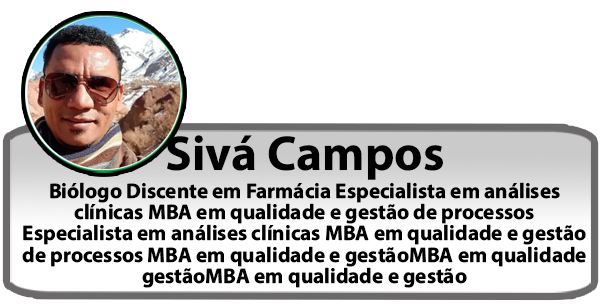
<style>
.page{position:relative;width:600px;height:307px;background:#ffffff}
.page>*{position:absolute;margin:0}
.t1{font:21.2px/21.2px "MyriadConceptRoman-Bold";color:#000000}
.t2{font:49.4px/14.1px "MyriadConceptRoman-Bold";color:#000000}
.t3{font:21.2px/14.1px "MyriadConceptRoman-Bold";color:#000000}
</style>
<div class="page">
<p class="t1" style="left:22px;top:135px;width:564px;height:153px;text-align:center"><span class="t2">Sivá Campos<br></span><span class="t3"><br>Biólogo Discente em Farmácia Especialista em análises<br></span>clínicas MBA em qualidade e gestão de processos<br>Especialista em análises clínicas MBA em qualidade e gestão<br>de processos MBA em qualidade e gestãoMBA em qualidade<br>gestãoMBA em qualidade e gestão</p>
</div>
